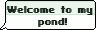
<style>
.page{position:relative;width:96px;height:30px;background:#fcfffb}
.page>*{position:absolute;margin:0}
.t1{font:10px "SFPixelate-Bold";color:#1b281e;scale:0.95 1}
</style>
<div class="page">
<p class="t1" style="left:7px;top:6px;width:85px;height:21px;text-align:center">Welcome to my <br>pond!</p>
<p class="t1" style="left:8px;top:6px;width:85px;height:21px;text-align:center">Welcome to my <br>pond!</p>
</div>
